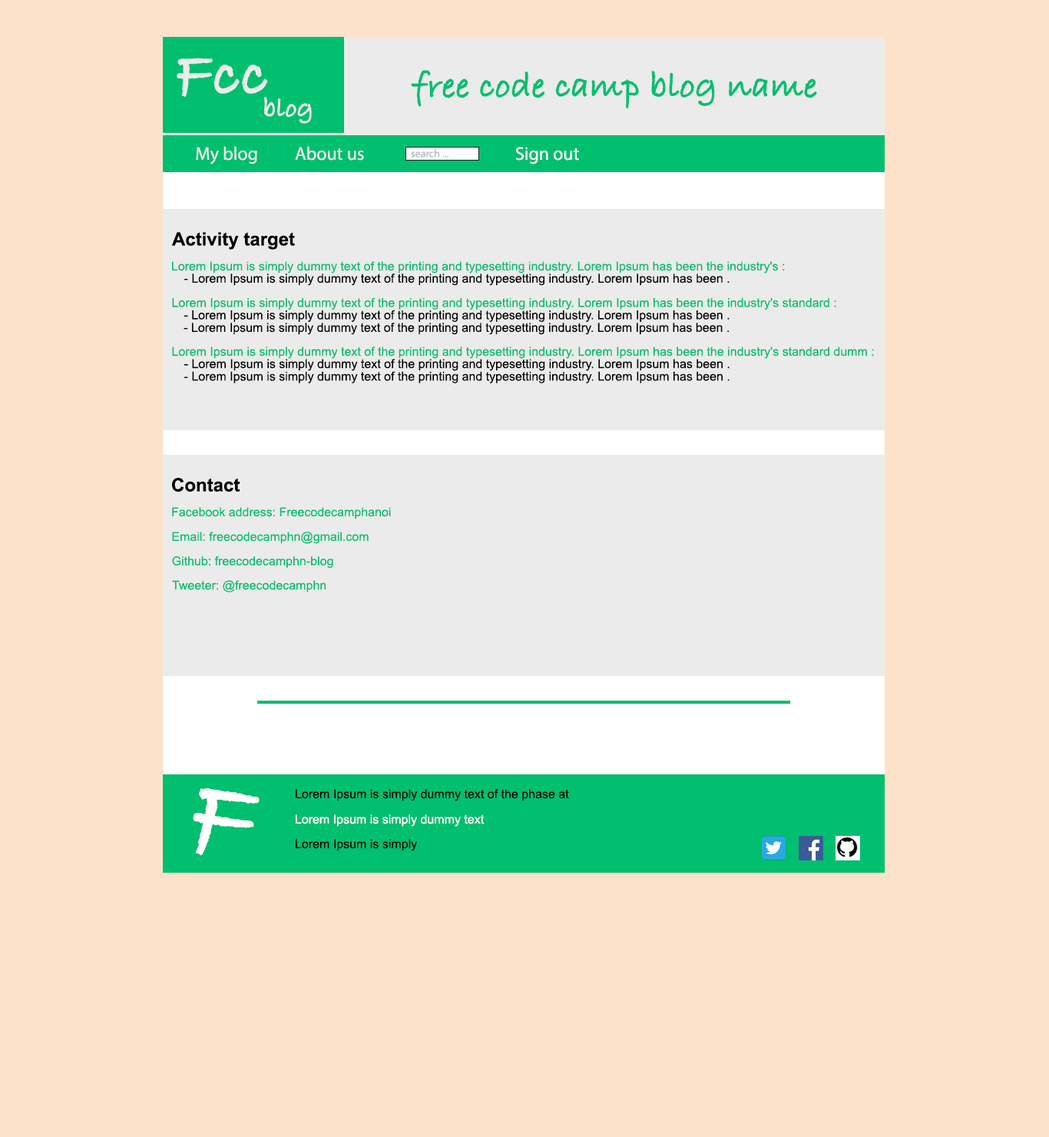
<style>
.page{position:relative;width:1049px;height:1137px;background:#fde2ca}
.page>*{position:absolute;margin:0}
.t1{font:65.3px "BradleyHandITCTT-Bold";color:#ebebeb}
.t2{font:36.9px "BradleyHandITCTT-Bold";color:#00bf6f}
.t3{font:27.6px "BradleyHandITCTT-Bold";color:#ebebeb}
.t4{font:18.4px "MyriadPro-Regular";color:#ebebeb}
.t5{font:10.8px "MyriadPro-Regular";color:#b7b7b7}
.t6{font:18.4px "MyriadPro-Regular";color:#ffffff}
.t7{font:18.4px "Arial-BoldMT";color:#000000}
.t8{font:12.3px "ArialMT";color:#00bf6f}
.t9{font:12.3px "ArialMT";color:#000000}
.t10{font:115.2px "BradleyHandITCTT-Bold";color:#ffffff}
.t11{font:12.3px "ArialMT";color:#ffffff}
</style>
<div class="page">
<p class="t1" style="left:177px;top:58px;width:90px;height:39px">Fcc</p>
<p class="t2" style="left:411px;top:70px;width:406px;height:38px">free code camp blog name</p>
<p class="t3" style="left:264px;top:97px;width:48px;height:27px">blog</p>
<p class="t4" style="left:196px;top:146px;width:61px;height:18px">My blog</p>
<p class="t4" style="left:295px;top:146px;width:69px;height:15px">About us</p>
<p class="t5" style="left:411px;top:149px;width:38px;height:8px">search ...</p>
<p class="t6" style="left:516px;top:147px;width:63px;height:17px">Sign out</p>
<p class="t7" style="left:172px;top:232px;width:123px;height:18px">Activity target</p>
<p class="t8" style="left:172px;top:261px;width:613px;height:12px">Lorem Ipsum is simply dummy text of the printing and typesetting industry. Lorem Ipsum has been the industry's :</p>
<p class="t9" style="left:184px;top:273px;width:546px;height:13px">- Lorem Ipsum is simply dummy text of the printing and typesetting industry. Lorem Ipsum has been .</p>
<p class="t8" style="left:172px;top:297px;width:664px;height:13px">Lorem Ipsum is simply dummy text of the printing and typesetting industry. Lorem Ipsum has been the industry's standard :</p>
<p class="t9" style="left:184px;top:310px;width:546px;height:12px">- Lorem Ipsum is simply dummy text of the printing and typesetting industry. Lorem Ipsum has been .</p>
<p class="t9" style="left:184px;top:323px;width:545px;height:12px">- Lorem Ipsum is simply dummy text of the printing and typesetting industry. Lorem Ipsum has been .</p>
<p class="t8" style="left:172px;top:346px;width:702px;height:13px">Lorem Ipsum is simply dummy text of the printing and typesetting industry. Lorem Ipsum has been the industry's standard dumm :</p>
<p class="t9" style="left:184px;top:359px;width:546px;height:12px">- Lorem Ipsum is simply dummy text of the printing and typesetting industry. Lorem Ipsum has been .</p>
<p class="t9" style="left:184px;top:371px;width:546px;height:12px">- Lorem Ipsum is simply dummy text of the printing and typesetting industry. Lorem Ipsum has been .</p>
<p class="t7" style="left:172px;top:478px;width:68px;height:14px">Contact</p>
<p class="t8" style="left:172px;top:507px;width:219px;height:12px">Facebook address: Freecodecamphanoi</p>
<p class="t8" style="left:172px;top:531px;width:197px;height:13px">Email: freecodecamphn@gmail.com</p>
<p class="t8" style="left:172px;top:556px;width:161px;height:12px">Github: freecodecamphn-blog</p>
<p class="t8" style="left:172px;top:580px;width:154px;height:12px">Tweeter: @freecodecamphn</p>
<p class="t10" style="left:193px;top:788px;width:67px;height:68px;rotate:10deg">F</p>
<p class="t9" style="left:296px;top:789px;width:273px;height:12px">Lorem Ipsum is simply dummy text of the phase at</p>
<p class="t11" style="left:296px;top:814px;width:189px;height:12px">Lorem Ipsum is simply dummy text</p>
<p class="t9" style="left:296px;top:839px;width:122px;height:12px">Lorem Ipsum is simply</p>
</div>
